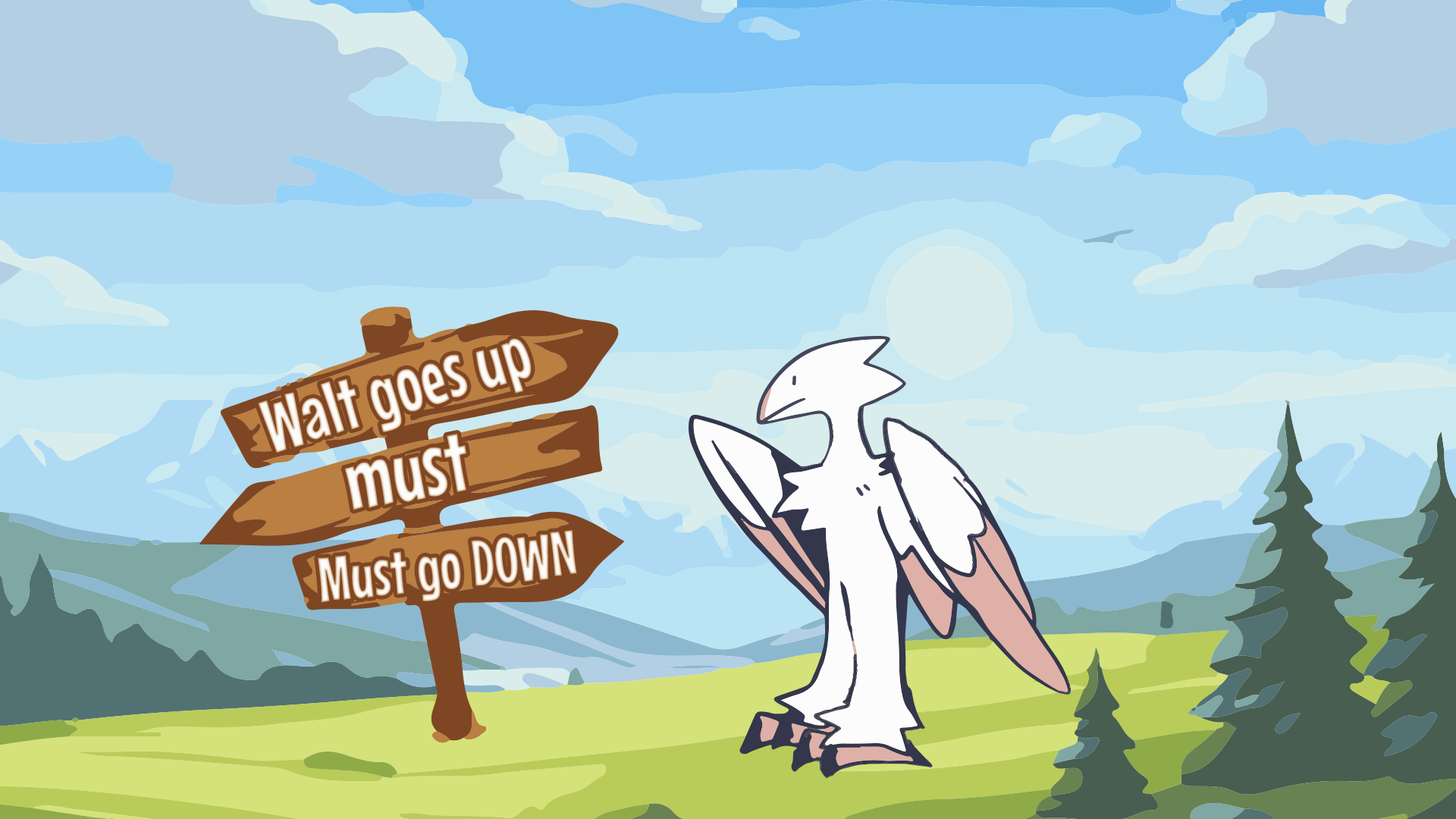
<style>
.page{position:relative;width:1456px;height:819px}
.page>*{position:absolute;margin:0}
.t1{font:75.5px "MouseMemoirs-Regular"}
.t2{font:86.3px "MouseMemoirs-Regular";color:#ffffff}
.t3{font:63.2px "MouseMemoirs-Regular"}
</style>
<div class="page">
<p class="t1" style="left:258px;top:338px;width:274px;height:115px;rotate:-17deg">Walt goes up</p>
<p class="t2" style="left:344px;top:434px;width:122px;height:76px;rotate:-11deg">must</p>
<p class="t3" style="left:318px;top:530px;width:259px;height:73px;rotate:-6deg">Must go DOWN</p>
</div>
